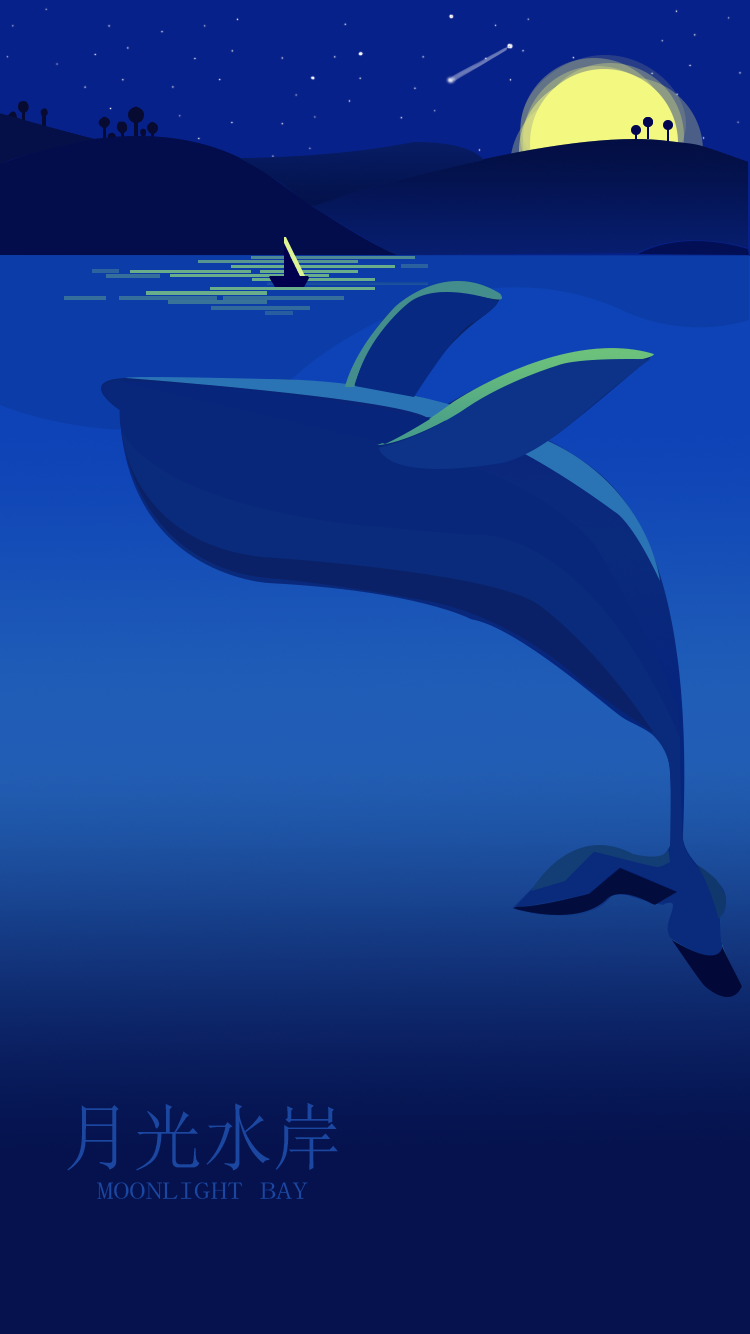
<style>
.page{position:relative;width:750px;height:1334px}
.page>*{position:absolute;margin:0}
.t1{font:73.6px "SimSun";color:#1b47a0;scale:0.95 1}
.t2{font:24px "SimSun";color:#1b47a0;scale:1.36 1}
</style>
<div class="page">
<p class="t1" style="left:67px;top:1102px;width:271px;height:69px">月光水岸</p>
<p class="t2" style="left:97px;top:1182px;width:211px;height:17px">MOONLIGHT BAY</p>
</div>
